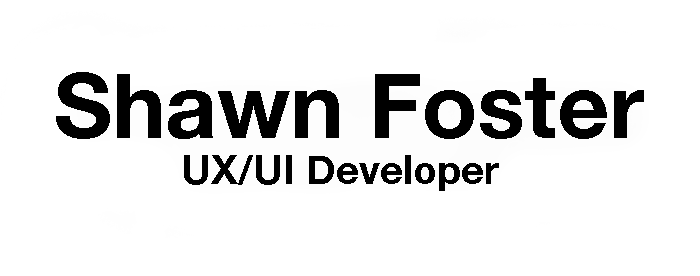
<style>
.page{position:relative;width:700px;height:276px;background:#ffffff}
.page>*{position:absolute;margin:0}
.t1{font:90px "HelveticaNeue-Bold";color:#000000}
.t2{font:40px "HelveticaNeue-Bold";color:#000000}
</style>
<div class="page">
<p class="t1" style="left:56px;top:72px;width:588px;height:67px">Shawn Foster</p>
<p class="t2" style="left:184px;top:155px;width:315px;height:36px">UX/UI Developer</p>
</div>
